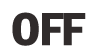
<style>
.page{position:relative;width:100px;height:56px;background:#ffffff}
.page>*{position:absolute;margin:0}
.t1{font:81.7px "FranklinGothic-DemiCond";letter-spacing:-0.06em;color:#302b2b;font-weight:bold;scale:1.12 1}
</style>
<div class="page">
<p class="t1" style="left:12px;top:12px;width:74px;height:34px">OFF</p>
</div>
